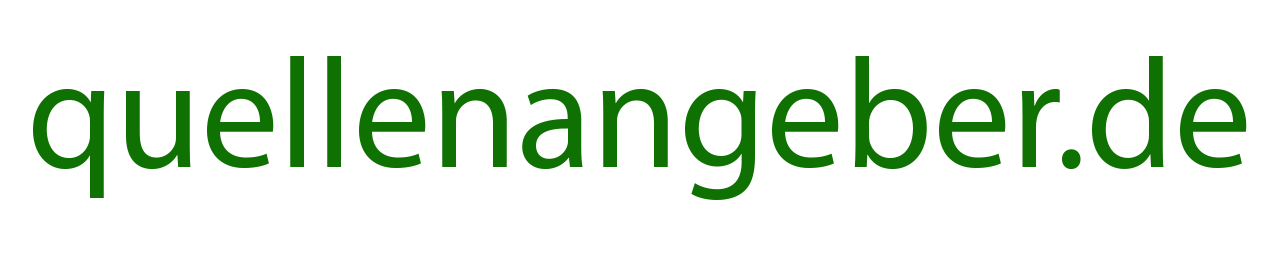
<style>
.page{position:relative;width:1280px;height:256px;background:#ffffff}
.page>*{position:absolute;margin:0}
.t1{font:156px "MyriadPro-Regular";color:#0f7102}
</style>
<div class="page">
<p class="t1" style="left:33px;top:56px;width:1214px;height:144px">quellenangeber.de</p>
</div>
